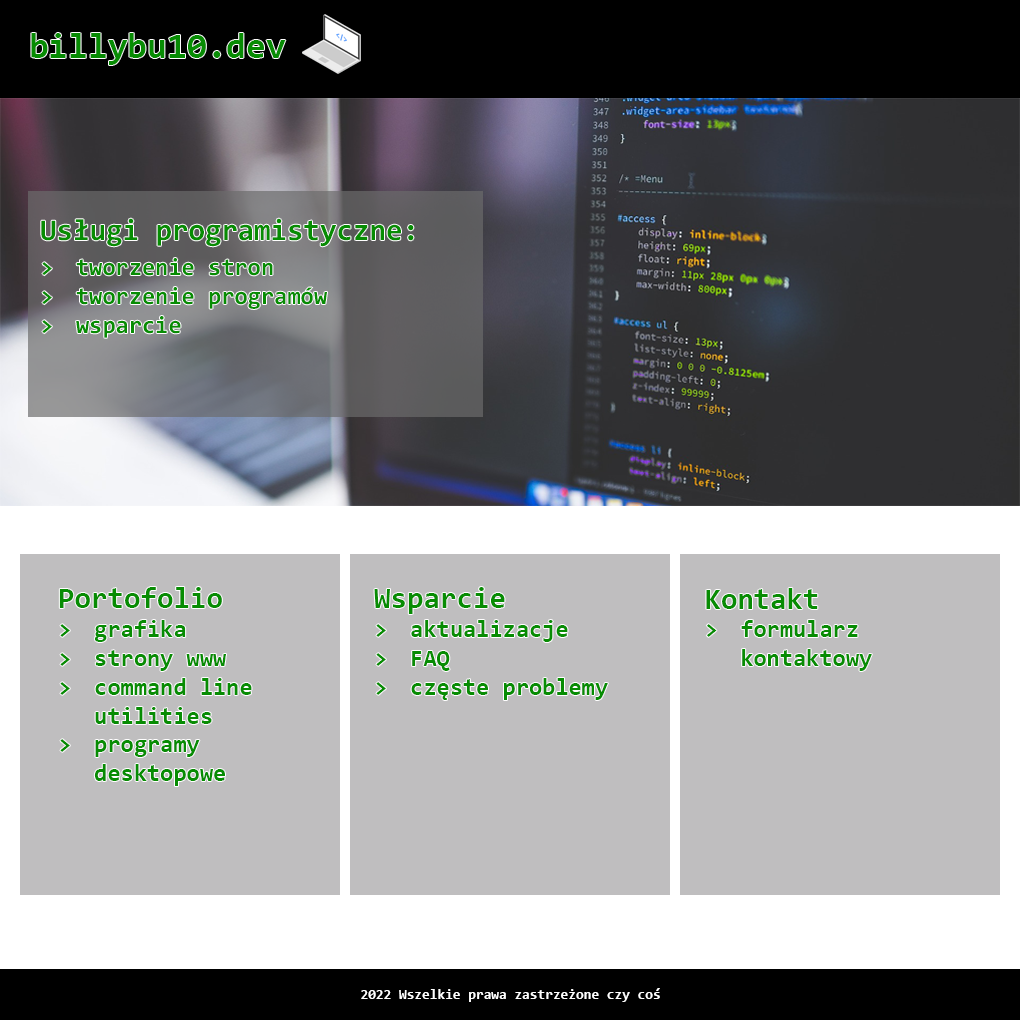
<style>
.page{position:relative;width:1020px;height:1020px;background:#bfbebf}
.page>*{position:absolute;margin:0}
.t1{font:36px "Consolas-Bold";color:#078c03}
.t2{font:24px "Consolas-Bold";color:#078c03}
.t3{font:29.9px "Consolas-Bold";color:#078c03}
.t4{font:30px "Consolas-Bold";color:#078c03}
.t5{font:14px "Consolas-Bold";color:#ffffff}
</style>
<div class="page">
<p class="t1" style="left:31px;top:33px;width:255px;height:32px">billybu10.dev</p>
<p class="t2" style="left:41px;top:218px;width:373px;height:120px"><span class="t3">Usługi programistyczne:<br></span>&gt; tworzenie stron<br>&gt; tworzenie programów<br>&gt; wsparcie</p>
<p class="t2" style="left:59px;top:587px;width:193px;height:199px"><span class="t4">Portofolio<br></span>&gt; grafika<br>&gt; strony www<br>&gt; command line <br> utilities<br>&gt; programy <br> desktopowe</p>
<p class="t2" style="left:374px;top:587px;width:234px;height:113px"><span class="t4">Wsparcie<br></span>&gt; aktualizacje<br>&gt; FAQ<br>&gt; częste problemy</p>
<p class="t2" style="left:706px;top:588px;width:166px;height:83px"><span class="t4">Kontakt<br></span>&gt; formularz<br> kontaktowy</p>
<p class="t5" style="left:361px;top:988px;width:299px;height:14px">2022 Wszelkie prawa zastrzeżone czy coś</p>
</div>
